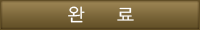
<style>
.page{position:relative;width:200px;height:30px}
.page>*{position:absolute;margin:0}
.t1{font:18px "YGO125";color:#ffffff}
</style>
<div class="page">
<p class="t1" style="left:68px;top:6px;width:66px;height:17px">완     료</p>
</div>
